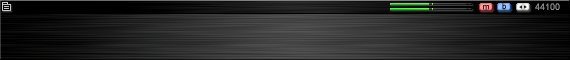
<style>
.page{position:relative;width:570px;height:60px}
.page>*{position:absolute;margin:0}
.t1{font:8px "ArialMT"}
.t2{font:9px "ArialMT";color:#848484}
</style>
<div class="page">
<p class="t1" style="left:483px;top:5px;width:6px;height:5px">m</p>
<p class="t1" style="left:502px;top:3px;width:4px;height:6px">b</p>
<p class="t2" style="left:535px;top:3px;width:25px;height:7px">44100</p>
</div>
